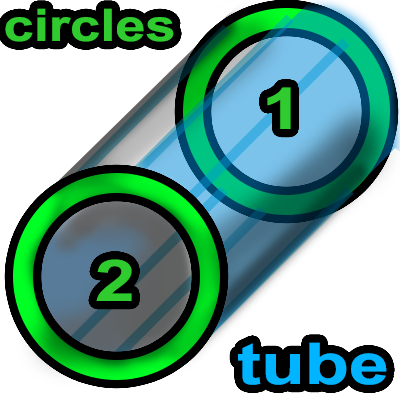
<style>
.page{position:relative;width:400px;height:400px;background:#ffffff}
.page>*{position:absolute;margin:0}
.t1{font:44.7px "Arial-BoldMT";color:#2fcb2f;scale:1.22 1}
.t2{font:57.6px "Arial-BoldMT";color:#2fcb2f;scale:1.25 1}
.t3{font:57.6px "Arial-BoldMT";color:#00b4ff;scale:1.25 1}
</style>
<div class="page">
<p class="t1" style="left:5px;top:8px;width:169px;height:34px">circles</p>
<p class="t2" style="left:267px;top:87px;width:24px;height:42px">1</p>
<p class="t2" style="left:96px;top:259px;width:36px;height:42px">2</p>
<p class="t3" style="left:238px;top:342px;width:149px;height:43px">tube</p>
</div>
